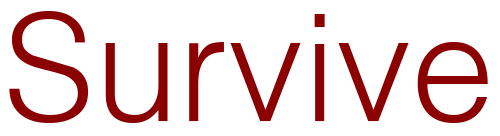
<style>
.page{position:relative;width:500px;height:136px;background:#ffffff}
.page>*{position:absolute;margin:0}
.t1{font:150px "HelvLight-Normal";color:#8b0000}
</style>
<div class="page">
<p class="t1" style="left:9px;top:11px;width:479px;height:112px">Survive</p>
</div>
